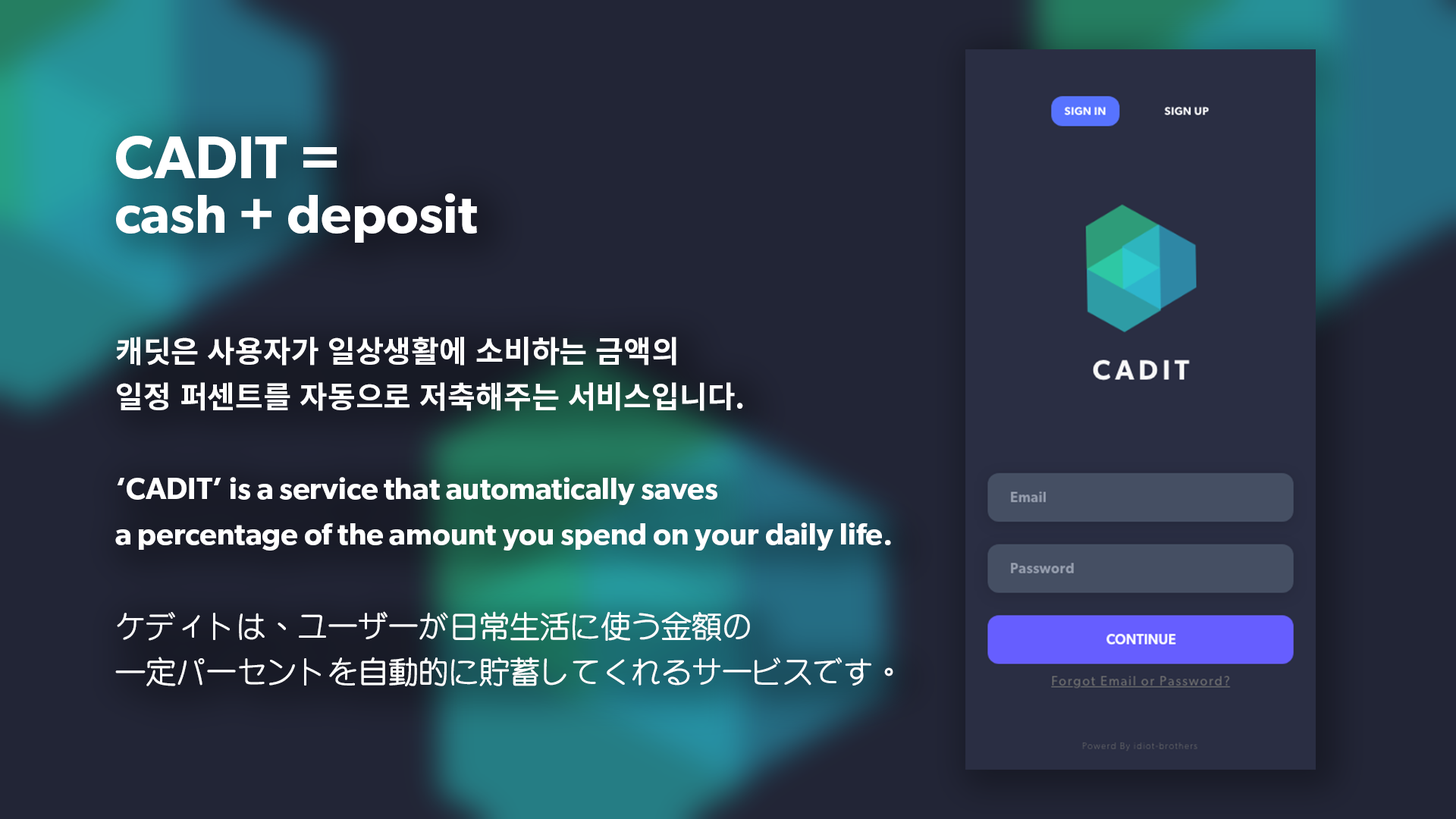
<style>
.page{position:relative;width:1456px;height:819px;background:#222536}
.page>*{position:absolute;margin:0}
.t1{font:54.6px/54.6px "Gibson-SemiBold";color:#ffffff}
.t2{font:60.7px/54.6px "Gibson-SemiBold";color:#ffffff}
.t3{font:30.3px/45.5px "Gibson-SemiBold";color:#ffffff}
.t4{font:30.3px/45.5px "NotoSansKR-Bold";color:#ffffff}
.t5{font:30.3px/45.5px "STYuanti-TC-Regular";color:#ffffff}
</style>
<div class="page">
<p class="t1" style="left:116px;top:136px;width:361px;height:107px"><span class="t2">CADIT =</span> <br>cash + deposit</p>
<p class="t3" style="left:115px;top:337px;width:778px;height:350px"><span class="t4">캐딧은 사용자가 일상생활에 소비하는 금액의<br>일정 퍼센트를 자동으로 저축해주는 서비스입니다.<br><br></span>‘CADIT’ is a service that automatically saves <br>a percentage of the amount you spend on your daily life.<br><br><span class="t5">ケディトは、ユーザーが日常生活に使う金額の<br>一定パーセントを自動的に貯蓄してくれるサービスです。</span></p>
</div>
